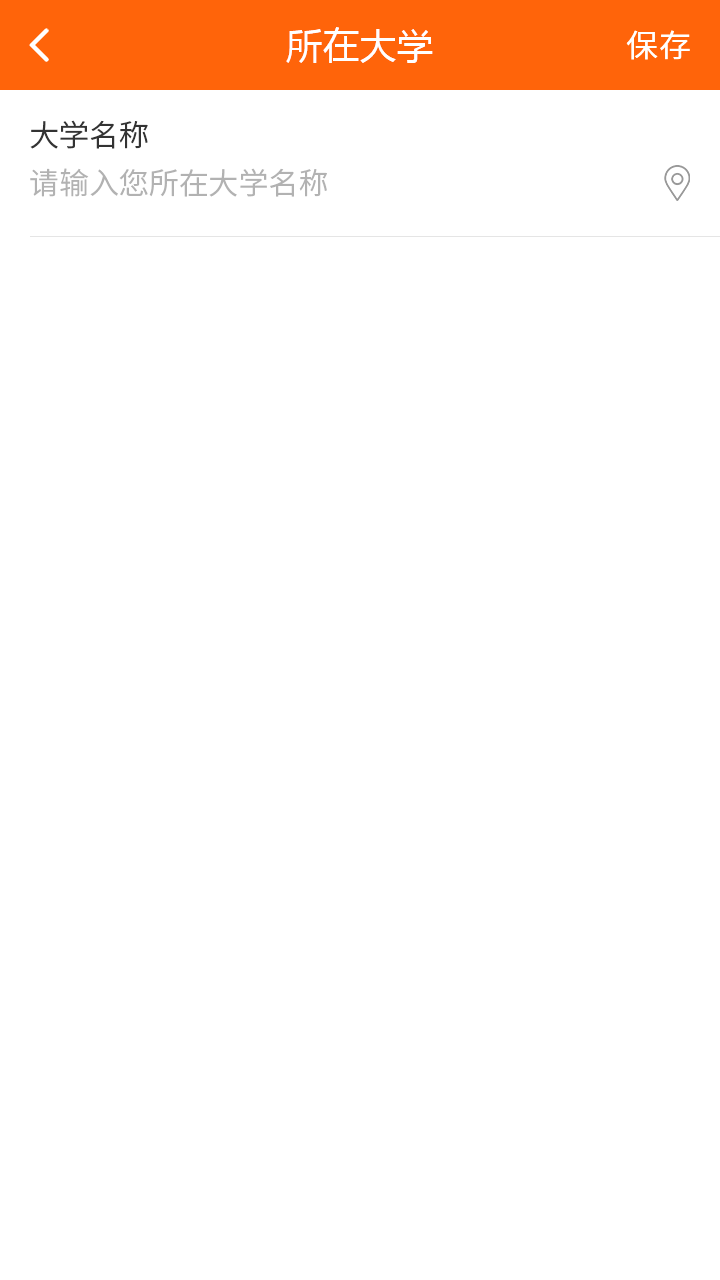
<style>
.page{position:relative;width:720px;height:1280px;background:#ffffff}
.page>*{position:absolute;margin:0}
.t1{font:36px "MicrosoftYaHei";letter-spacing:0.03em;color:#ffffff}
.t2{font:32px "NotoSansCJKsc-Regular";letter-spacing:0.03em;color:#ffffff;font-variant:small-caps}
.t3{font:30px "NotoSansCJKsc-DemiLight";color:#333333}
.t4{font:30px "NotoSansCJKsc-DemiLight";color:#b2b2b2}
</style>
<div class="page">
<p class="t1" style="left:286px;top:27px;width:147px;height:36px">所在大学</p>
<p class="t2" style="left:626px;top:30px;width:64px;height:30px">保存</p>
<p class="t3" style="left:30px;top:120px;width:118px;height:29px">大学名称</p>
<p class="t4" style="left:30px;top:168px;width:297px;height:29px">请输入您所在大学名称</p>
</div>
